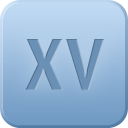
<style>
.page{position:relative;width:128px;height:128px}
.page>*{position:absolute;margin:0}
.t1{font:73px "PTSans-NarrowBold";color:#6a90b6}
</style>
<div class="page">
<p class="t1" style="left:25px;top:39px;width:80px;height:52px">XV</p>
</div>
